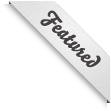
<style>
.page{position:relative;width:111px;height:111px;background:#ffffff}
.page>*{position:absolute;margin:0}
.t1{font:20.8px "Bello-Script";color:#464242}
</style>
<div class="page">
<p class="t1" style="left:40px;top:10px;width:61px;height:58px;rotate:45deg">Featured</p>
</div>
